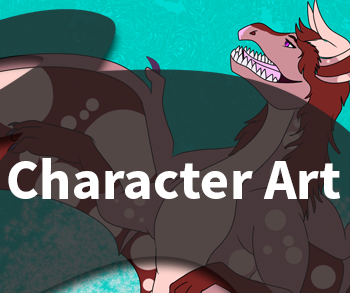
<style>
.page{position:relative;width:350px;height:293px}
.page>*{position:absolute;margin:0}
.t1{font:57px "SourceSansPro-Bold";color:#ffffff}
</style>
<div class="page">
<p class="t1" style="left:8px;top:158px;width:332px;height:41px">Character Art</p>
</div>
